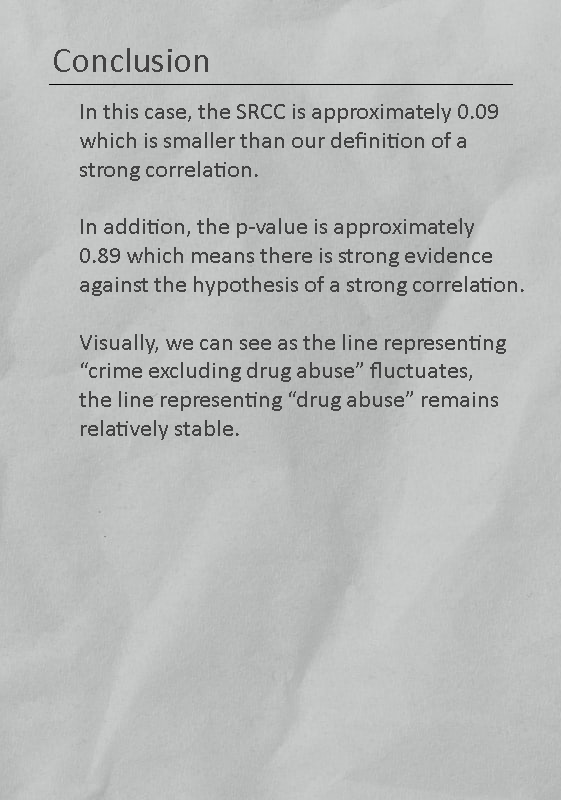
<style>
.page{position:relative;width:561px;height:800px}
.page>*{position:absolute;margin:0}
.t1{font:36px "Calibri";color:#434343}
.t2{font:24px "Calibri";color:#434343}
</style>
<div class="page">
<p class="t1" style="left:54px;top:48px;width:154px;height:24px">Conclusion</p>
<p class="t2" style="left:79px;top:103px;width:445px;height:337px">In this case, the SRCC is approximately 0.09<br>which is smaller than our definition of a<br>strong correlation.<br><br>In addition, the p-value is approximately <br>0.89 which means there is strong evidence <br>against the hypothesis of a strong correlation.<br><br>Visually, we can see as the line representing<br>“crime excluding drug abuse” fluctuates, <br>the line representing “drug abuse” remains<br>relatively stable.</p>
</div>
